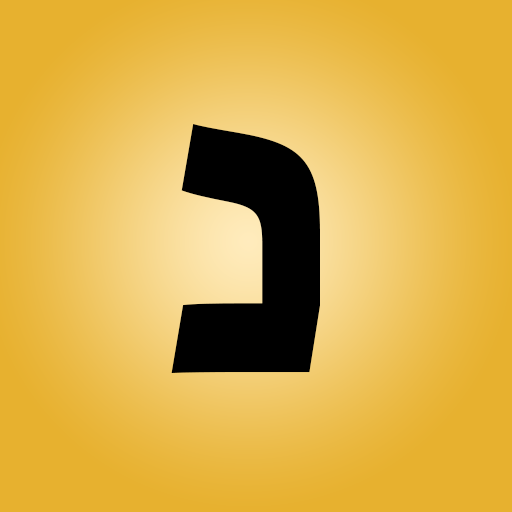
<style>
.page{position:relative;width:512px;height:512px}
.page>*{position:absolute;margin:0}
.t1{font:440px "MyriadHebrew-Bold";color:#000000}
</style>
<div class="page">
<p class="t1" style="left:171px;top:124px;width:149px;height:249px">נ</p>
</div>
